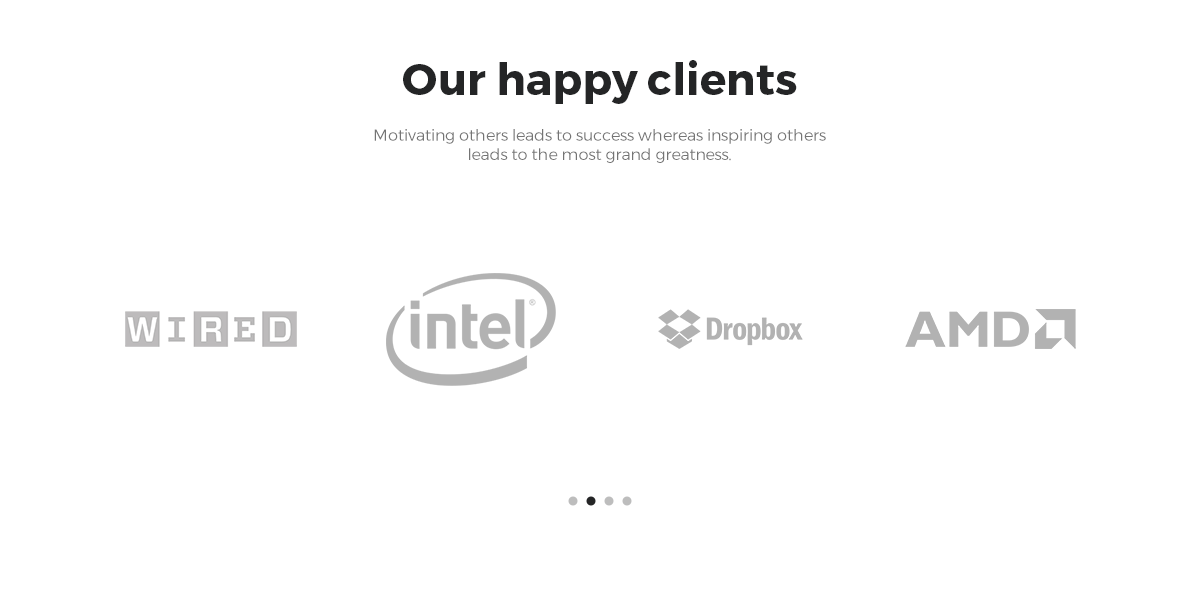
<style>
.page{position:relative;width:1200px;height:600px;background:#ffffff}
.page>*{position:absolute;margin:0}
.t1{font:44px "Montserrat-Bold";color:#242526}
.t2{font:16px "Montserrat-Light";color:#747474}
</style>
<div class="page">
<p class="t1" style="left:403px;top:60px;width:394px;height:44px">Our happy clients</p>
<p class="t2" style="left:374px;top:129px;width:452px;height:34px;text-align:center">Motivating others leads to success whereas inspiring others leads to the most grand greatness.</p>
</div>
